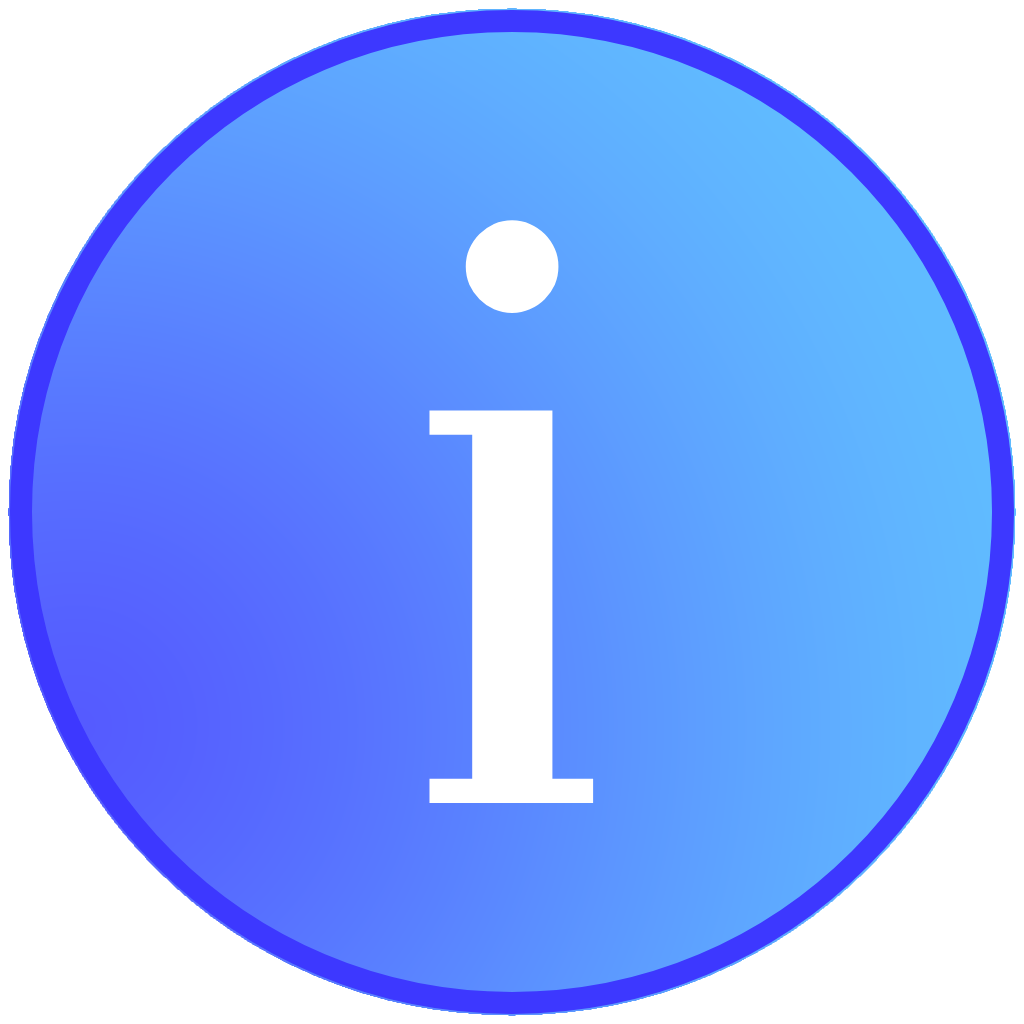
<style>
.page{position:relative;width:1024px;height:1024px;background:#ffffff}
.page>*{position:absolute;margin:0}
.t1{font:825.4px "DustismoRoman";color:#ffffff}
</style>
<div class="page">
<p class="t1" style="left:429px;top:220px;width:165px;height:583px">i</p>
</div>
